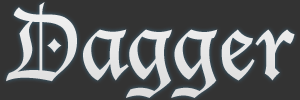
<style>
.page{position:relative;width:300px;height:100px;background:#333333}
.page>*{position:absolute;margin:0}
.t1{font:90px "LucidaBlackletter";color:#f0f0f0}
</style>
<div class="page">
<p class="t1" style="left:6px;top:2px;width:289px;height:96px">Dagger</p>
</div>
